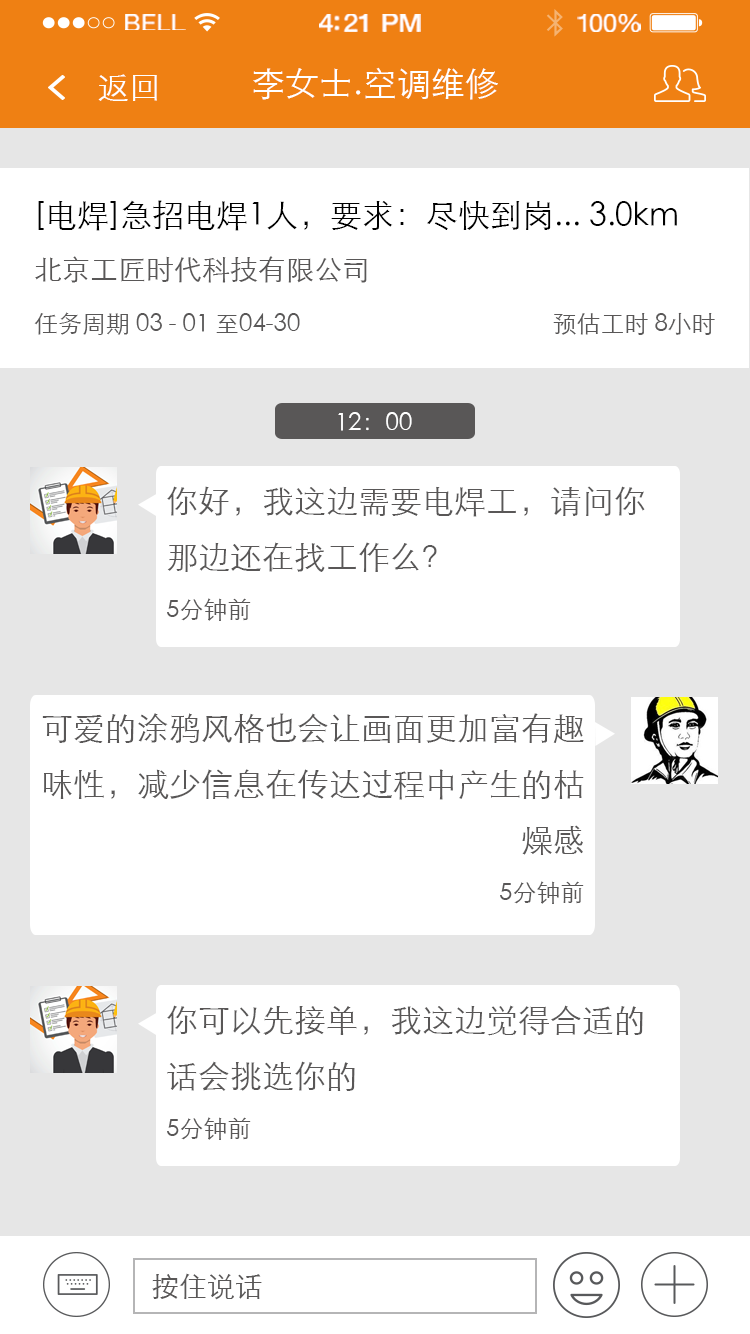
<style>
.page{position:relative;width:750px;height:1334px;background:#ffffff}
.page>*{position:absolute;margin:0}
.t1{font:23.3px "HelveticaNeue";letter-spacing:0.02em;color:#ffffff;scale:1.06 1}
.t2{font:25.3px "HelveticaNeue-Medium";letter-spacing:-0.02em;color:#ffffff;scale:1.06 1}
.t3{font:24.3px "HelveticaNeue";letter-spacing:-0.02em;color:#ffffff;scale:1.06 1}
.t4{font:32px "STXihei";color:#ffffff}
.t5{font:34px "STXihei";color:#ffffff}
.t6{font:24px/56px "STXihei";color:#595757}
.t7{font:32px/56px "STXihei";color:#000000}
.t8{font:28px/56px "STXihei";color:#595757}
.t9{font:24px "STXihei";color:#ffffff}
.t10{font:32px/56px "STXihei";color:#595757}
.t11{font:28px "STXihei";color:#595757}
</style>
<div class="page">
<p class="t1" style="left:125px;top:14px;width:61px;height:16px">BELL</p>
<p class="t2" style="left:319px;top:14px;width:102px;height:18px">4:21 PM</p>
<p class="t3" style="left:577px;top:14px;width:64px;height:18px">100%</p>
<p class="t4" style="left:98px;top:74px;width:59px;height:27px">返回</p>
<p class="t5" style="left:253px;top:67px;width:245px;height:33px">李女士.空调维修</p>
<p class="t6" style="left:34px;top:200px;width:681px;height:135px"><span class="t7">[电焊]急招电焊1人，要求：尽快到岗... 3.0km<br></span><span class="t8">北京工匠时代科技有限公司<br></span>任务周期 03 - 01 至04-30                                          预估工时 8小时</p>
<p class="t9" style="left:338px;top:412px;width:74px;height:19px">12：00</p>
<p class="t10" style="left:167px;top:486px;width:478px;height:135px">你好，我这边需要电焊工，请问你<br>那边还在找工作么？<br><span class="t6">5分钟前</span></p>
<p class="t10" style="left:42px;top:713px;width:542px;height:191px;text-align:right">可爱的涂鸦风格也会让画面更加富有趣味性，减少信息在传达过程中产生的枯燥感<br><span class="t6">5分钟前</span></p>
<p class="t10" style="left:167px;top:1005px;width:476px;height:135px">你可以先接单，我这边觉得合适的<br>话会挑选你的<br><span class="t6">5分钟前</span></p>
<p class="t11" style="left:152px;top:1273px;width:110px;height:27px">按住说话</p>
</div>
